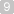
<style>
.page{position:relative;width:14px;height:14px;background:#c5c4c4}
.page>*{position:absolute;margin:0}
.t1{font:12px "ArialMT";color:#ffffff}
</style>
<div class="page">
<p class="t1" style="left:4px;top:2px;width:6px;height:9px">9</p>
</div>
